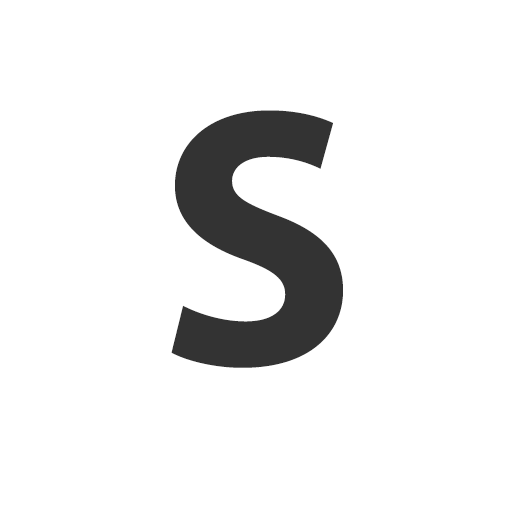
<style>
.page{position:relative;width:512px;height:512px;background:#ffffff}
.page>*{position:absolute;margin:0}
.t1{font:370px "MyriadPro-Bold";color:#333333}
</style>
<div class="page">
<p class="t1" style="left:171px;top:110px;width:172px;height:258px">S</p>
</div>
